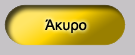
<style>
.page{position:relative;width:135px;height:55px;background:#c6c3c6}
.page>*{position:absolute;margin:0}
.t1{font:14.7px "ArialMT";color:#000000}
</style>
<div class="page">
<p class="t1" style="left:45px;top:19px;width:42px;height:14px">Άκυρο</p>
</div>
